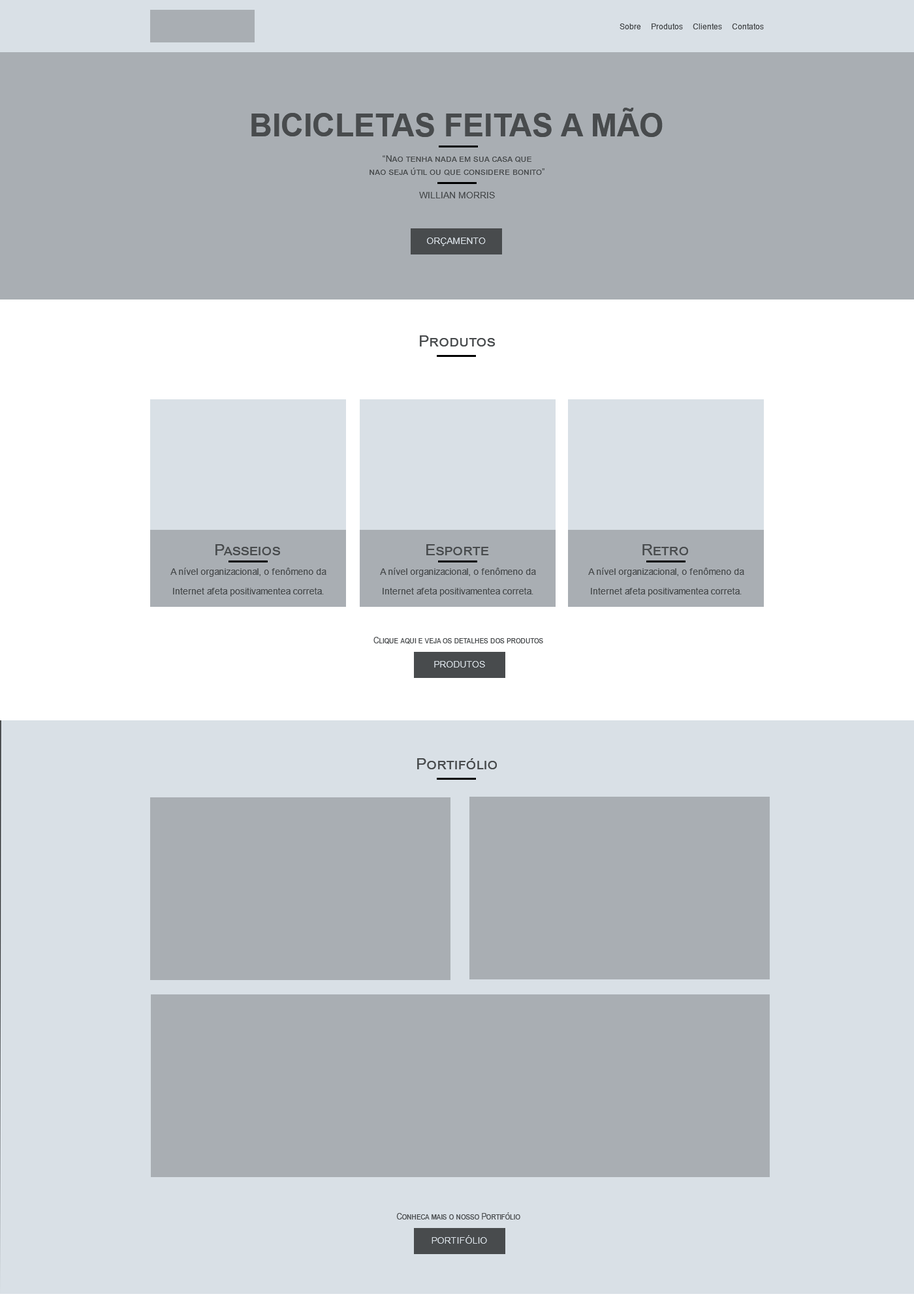
<style>
.page{position:relative;width:914px;height:1305px;background:#a9aeb3}
.page>*{position:absolute;margin:0}
.t1{font:7.8px "ArialMT";color:#484b4d}
.t2{font:31.3px "Arial-BoldMT";color:#484b4d;text-transform:uppercase}
.t3{font:9.1px/13.1px "ArialMT";color:#484b4d;font-variant:small-caps}
.t4{font:9.1px "ArialMT";color:#484b4d;text-transform:uppercase}
.t5{font:9.1px "ArialMT";color:#d9e0e6;text-transform:uppercase}
.t6{font:15.7px "ArialMT";color:#484b4d;font-variant:small-caps}
.t7{font:9.1px/13.1px "ArialMT";color:#484b4d}
.t8{font:9.1px "ArialMT";color:#484b4d;font-variant:small-caps;scale:0.83 1}
</style>
<div class="page">
<p class="t1" style="left:619px;top:23px;width:145px;height:6px">Sobre     Produtos     Clientes     Contatos</p>
<p class="t2" style="left:251px;top:108px;width:411px;height:29px">Bicicletas Feitas a Mão</p>
<p class="t3" style="left:369px;top:155px;width:175px;height:21px;text-align:center">“Nao tenha nada em sua casa que<br>nao seja útil ou que considere bonito”</p>
<p class="t4" style="left:419px;top:192px;width:76px;height:6px">willian morris</p>
<p class="t5" style="left:427px;top:238px;width:59px;height:8px">Orçamento</p>
<p class="t6" style="left:420px;top:335px;width:75px;height:12px">Produtos</p>
<p class="t6" style="left:215px;top:544px;width:65px;height:11px">Passeios</p>
<p class="t6" style="left:426px;top:544px;width:63px;height:11px">Esporte</p>
<p class="t6" style="left:642px;top:544px;width:46px;height:11px">Retro</p>
<p class="t7" style="left:170px;top:568px;width:156px;height:28px;text-align:center">A nível organizacional, o fenômeno da Internet afeta positivamentea correta.</p>
<p class="t7" style="left:380px;top:568px;width:156px;height:28px;text-align:center">A nível organizacional, o fenômeno da Internet afeta positivamentea correta.</p>
<p class="t7" style="left:588px;top:568px;width:156px;height:28px;text-align:center">A nível organizacional, o fenômeno da Internet afeta positivamentea correta.</p>
<p class="t8" style="left:373px;top:637px;width:170px;height:7px">Clique aqui e veja os detalhes dos produtos</p>
<p class="t5" style="left:434px;top:661px;width:51px;height:7px">Produtos</p>
<p class="t6" style="left:417px;top:758px;width:80px;height:11px">Portifólio</p>
<p class="t8" style="left:396px;top:1213px;width:124px;height:7px">Conheca mais o nosso Portifólio</p>
<p class="t5" style="left:431px;top:1235px;width:56px;height:9px">Portifólio</p>
</div>
